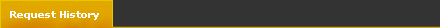
<style>
.page{position:relative;width:440px;height:28px;background:#333333}
.page>*{position:absolute;margin:0}
.t1{font:10px "Verdana-Bold";color:#ffffff}
</style>
<div class="page">
<p class="t1" style="left:10px;top:11px;width:89px;height:9px">Request History</p>
</div>
